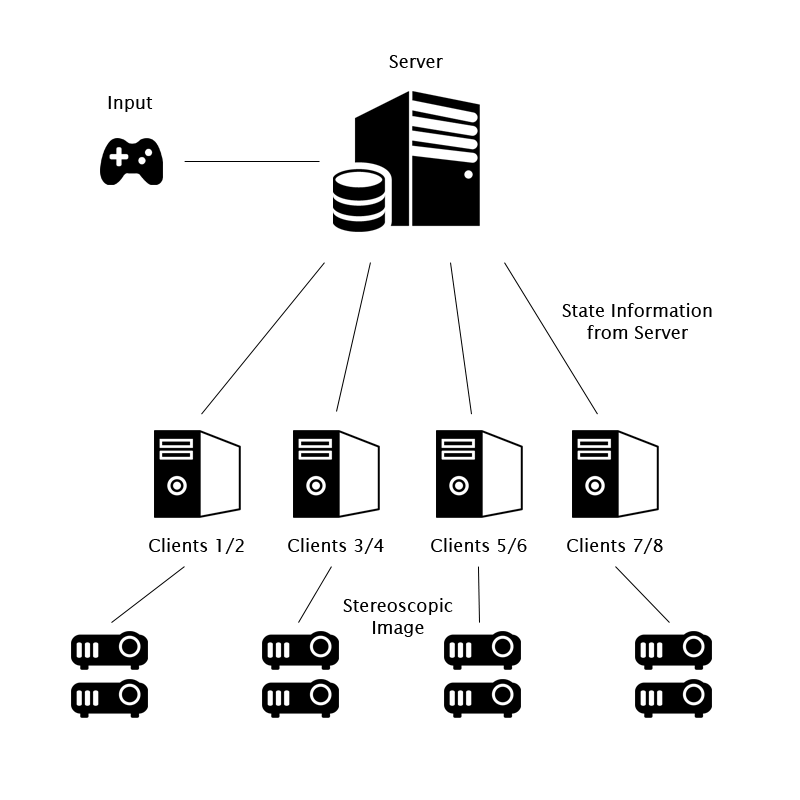
<style>
.page{position:relative;width:800px;height:800px;background:#ffffff}
.page>*{position:absolute;margin:0}
.t1{font:18px "LucidaSans";color:#000000}
</style>
<div class="page">
<p class="t1" style="left:389px;top:55px;width:54px;height:13px">Server</p>
<p class="t1" style="left:108px;top:96px;width:45px;height:16px">Input</p>
<p class="t1" style="left:562px;top:303px;width:150px;height:36px;text-align:center">State Information<br>from Server</p>
<p class="t1" style="left:149px;top:538px;width:95px;height:16px">Clients 1/2</p>
<p class="t1" style="left:288px;top:538px;width:96px;height:16px">Clients 3/4</p>
<p class="t1" style="left:431px;top:538px;width:96px;height:16px">Clients 5/6</p>
<p class="t1" style="left:567px;top:538px;width:96px;height:16px">Clients 7/8</p>
<p class="t1" style="left:343px;top:598px;width:110px;height:39px;text-align:center">Stereoscopic<br>Image</p>
</div>
